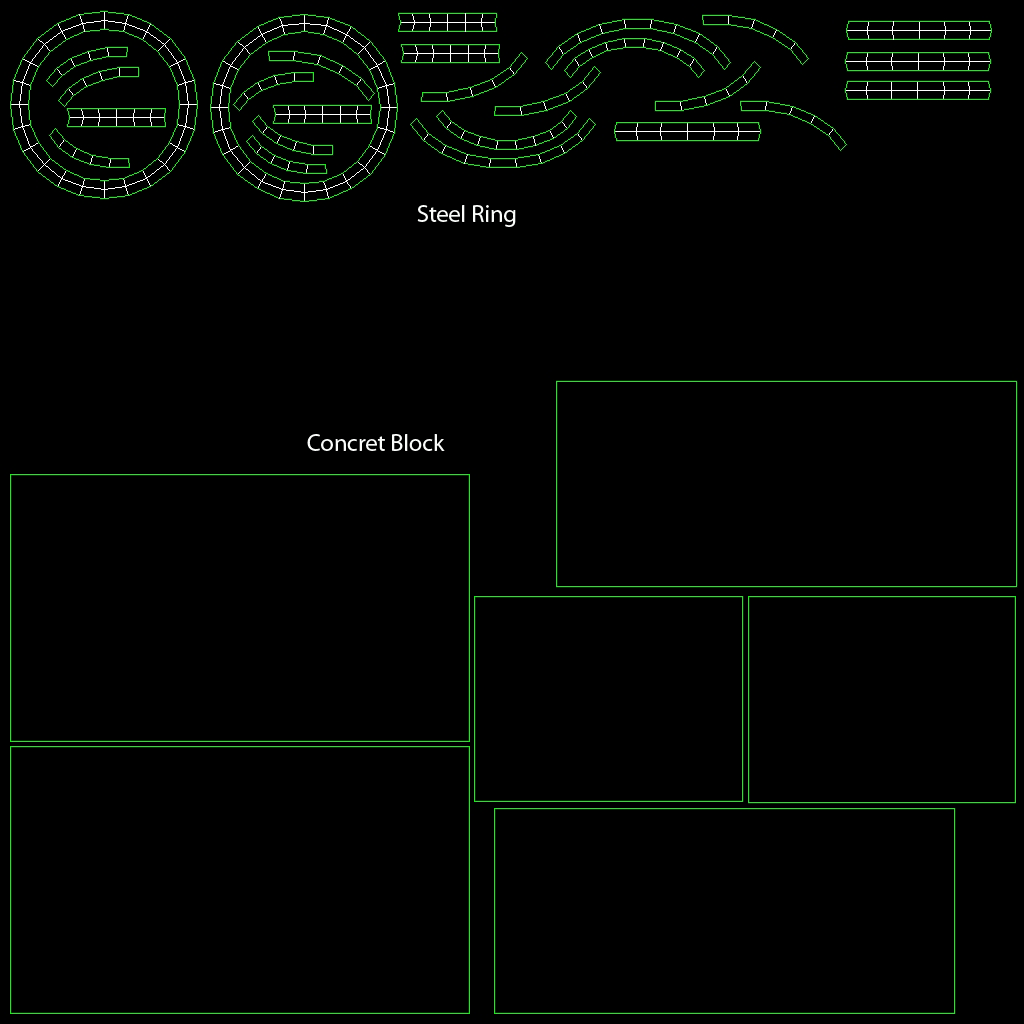
<style>
.page{position:relative;width:1024px;height:1024px;background:#000000}
.page>*{position:absolute;margin:0}
.t1{font:24px "MyriadPro-Regular";color:#fbfdfb}
</style>
<div class="page">
<p class="t1" style="left:417px;top:205px;width:99px;height:22px">Steel Ring</p>
<p class="t1" style="left:307px;top:434px;width:138px;height:17px">Concret Block</p>
</div>
